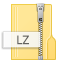
<style>
.page{position:relative;width:64px;height:64px;background:#ffffff}
.page>*{position:absolute;margin:0}
.t1{font:12px "SegoeUI";color:#64625e}
</style>
<div class="page">
<p class="t1" style="left:17px;top:35px;width:12px;height:10px">LZ</p>
</div>
